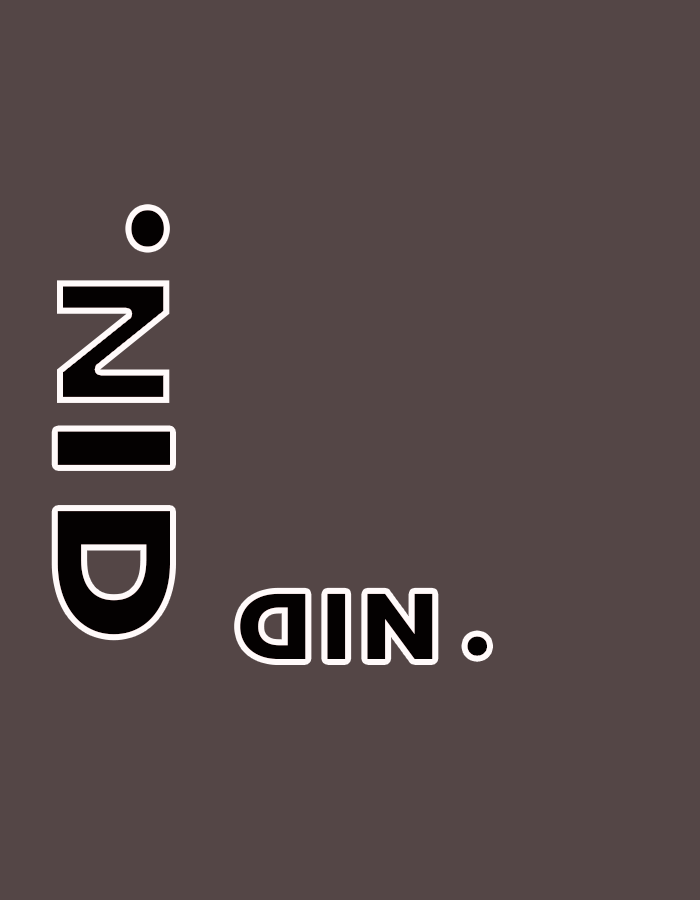
<style>
.page{position:relative;width:700px;height:900px;background:#544646}
.page>*{position:absolute;margin:0}
.t1{font:195.1px "Poppins-Bold";color:#010101;scale:0.82 1}
.t2{font:159.9px "Poppins-Bold";color:#010101;scale:1.22 1}
.t3{font:92.7px "Poppins-Bold";color:#010101;scale:1.11 1}
.t4{font:103.3px "Poppins-Bold";color:#010101;scale:0.9 1}
</style>
<div class="page">
<p class="t1" style="left:131px;top:210px;width:33px;height:37px">.</p>
<p class="t2" style="left:57px;top:431px;width:113px;height:34px;rotate:-90deg">I</p>
<p class="t2" style="left:57px;top:511px;width:113px;height:124px;rotate:90deg">D</p>
<p class="t3" style="left:240px;top:593px;width:66px;height:66px;rotate:-180deg">D</p>
<p class="t3" style="left:327px;top:593px;width:19px;height:66px">I</p>
<p class="t3" style="left:367px;top:593px;width:66px;height:66px">N</p>
<p class="t4" style="left:467px;top:636px;width:20px;height:20px;rotate:90deg">.</p>
</div>
